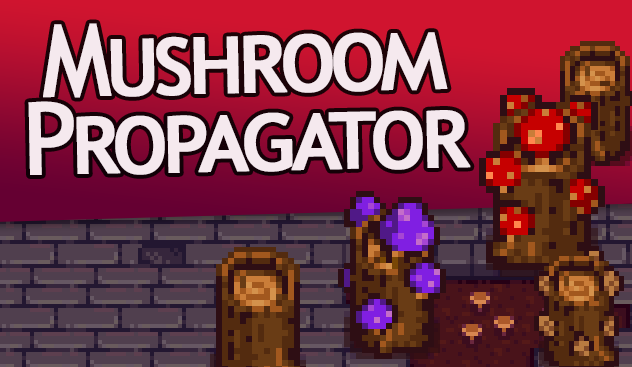
<style>
.page{position:relative;width:632px;height:367px}
.page>*{position:absolute;margin:0}
.t1{font:100px/78px "TrebuchetMS";letter-spacing:-0.05em;color:#f5e9ee;font-variant:small-caps;font-weight:bold;scale:0.95 1}
</style>
<div class="page">
<p class="t1" style="left:28px;top:23px;width:443px;height:152px;text-align:center;rotate:-1deg">Mushroom<br>Propagator</p>
</div>
